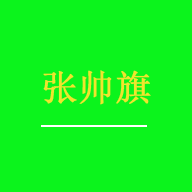
<style>
.page{position:relative;width:192px;height:192px;background:#0bf41c}
.page>*{position:absolute;margin:0}
.t1{font:36px "SimSun";color:#f0e52d;font-weight:bold}
</style>
<div class="page">
<p class="t1" style="left:43px;top:70px;width:108px;height:35px">张帅旗</p>
</div>
